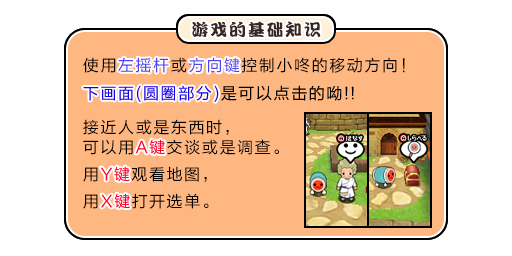
<style>
.page{position:relative;width:512px;height:256px;background:#ffffff}
.page>*{position:absolute;margin:0}
.t1{font:17px "DFPKanTingLiuW9";letter-spacing:0.1em;color:#3b2626}
.t2{font:16px "FZLTHJW--GB1-0";letter-spacing:0.1em;color:#000000}
.t3{font:16px "FZLTHJW--GB1-0";letter-spacing:0.1em;color:#5444ed}
.t4{font:16px "FZLTHJW--GB1-0";letter-spacing:0.1em;color:#5c4ced}
.t5{font:16px "FZLTHJW--GB1-0";letter-spacing:0.1em;color:#1600e6}
.t6{font:16px/20px "FZLTHJW--GB1-0";letter-spacing:0.1em;color:#000000}
.t7{font:16px/20px "FZLTHJW--GB1-0";letter-spacing:0.1em;color:#ff002a}
.t8{font:16px "FZLTHJW--GB1-0";letter-spacing:0.1em;color:#ff002a}
</style>
<div class="page">
<p class="t1" style="left:192px;top:21px;width:129px;height:17px">游戏的基础知识</p>
<p class="t2" style="left:83px;top:57px;width:322px;height:16px">使用<span class="t3">左摇杆</span>或<span class="t4">十字键</span>控制小咚的移动方向！</p>
<p class="t3" style="left:118px;top:57px;width:51px;height:16px">左摇杆</p>
<p class="t3" style="left:189px;top:57px;width:51px;height:16px">方向键</p>
<p class="t5" style="left:83px;top:85px;width:271px;height:17px">下画面(圆圈部分)<span class="t2">是可以点击的呦!!</span></p>
<p class="t5" style="left:83px;top:85px;width:136px;height:17px">下画面(圆圈部分)</p>
<p class="t6" style="left:83px;top:119px;width:196px;height:36px">接近人或是东西时，<br>可以用<span class="t7">A键</span>交谈或是调查。</p>
<p class="t8" style="left:135px;top:139px;width:30px;height:16px">A键</p>
<p class="t2" style="left:83px;top:166px;width:124px;height:16px">用<span class="t8">Y键</span>观看地图，</p>
<p class="t8" style="left:100px;top:166px;width:30px;height:16px">Y键</p>
<p class="t2" style="left:83px;top:193px;width:126px;height:16px">用<span class="t8">X键</span>打开选单。</p>
<p class="t8" style="left:101px;top:193px;width:29px;height:16px">X键</p>
</div>
